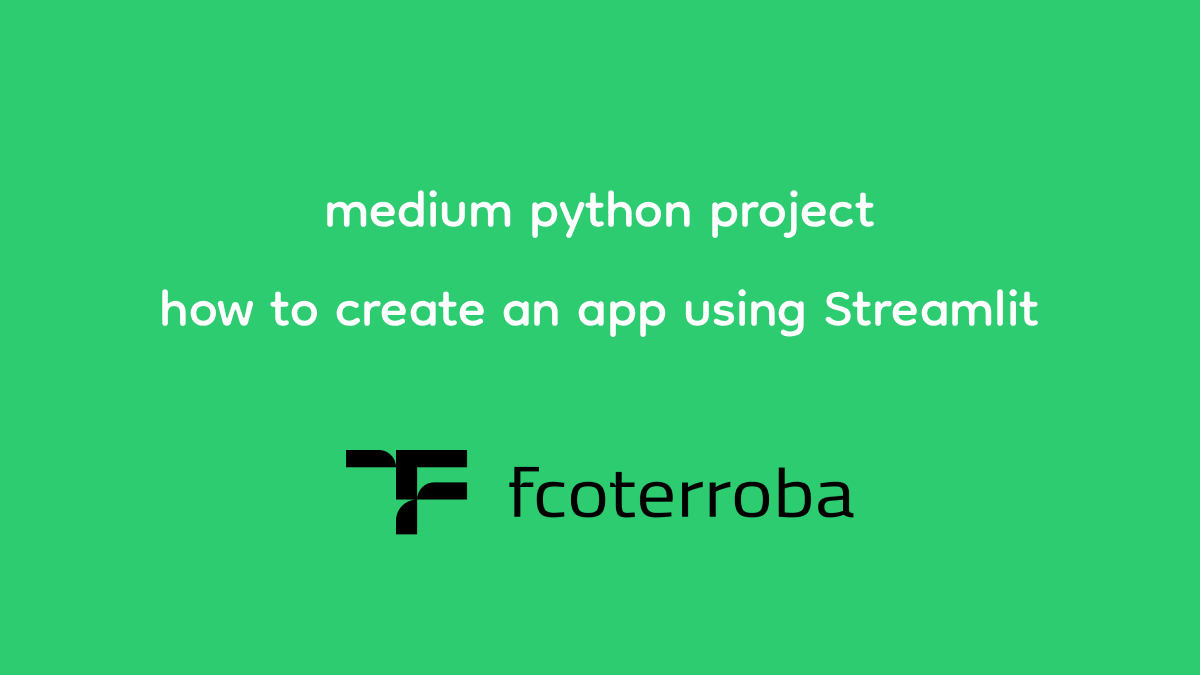
<style>
.page{position:relative;width:1200px;height:675px;background:#2dcc70}
.page>*{position:absolute;margin:0}
.t1{font:82px "Dongle-Regular";color:#ffffff}
</style>
<div class="page">
<p class="t1" style="left:162px;top:190px;width:876px;height:147px;text-align:center">medium python project<br>how to create an app using Streamlit</p>
</div>
